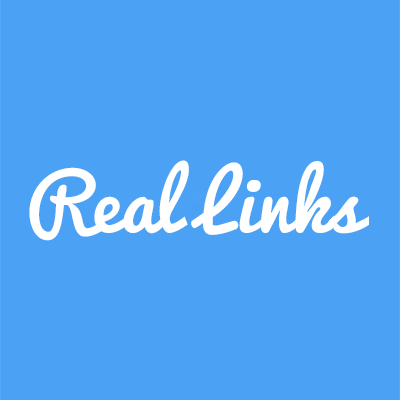
<style>
.page{position:relative;width:400px;height:400px;background:#4ba2f5}
.page>*{position:absolute;margin:0}
.t1{font:77.3px "Pacifico-Regular";color:#ffffff}
</style>
<div class="page">
<p class="t1" style="left:29px;top:160px;width:340px;height:81px">Real Links</p>
</div>
